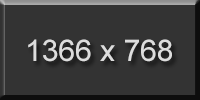
<style>
.page{position:relative;width:200px;height:100px;background:#333333}
.page>*{position:absolute;margin:0}
.t1{font:30px "ArialMT";color:#dddddd}
</style>
<div class="page">
<p class="t1" style="left:28px;top:39px;width:144px;height:23px">1366 x 768</p>
</div>
